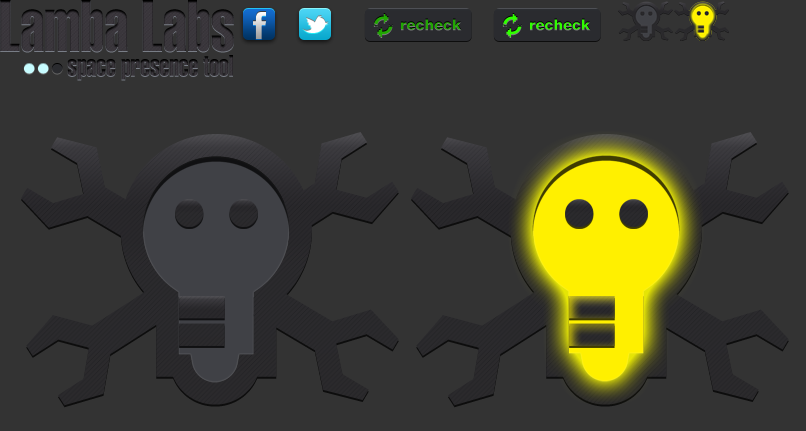
<style>
.page{position:relative;width:806px;height:431px;background:#333333}
.page>*{position:absolute;margin:0}
.t1{font:15px "Helvetica85-Heavy"}
.t2{font:29px "Helvetica-ExtraCompressed";color:#322e33}
</style>
<div class="page">
<p class="t1" style="left:401px;top:18px;width:61px;height:12px">recheck</p>
<p class="t1" style="left:530px;top:18px;width:61px;height:12px">recheck</p>
<p class="t2" style="left:67px;top:55px;width:166px;height:25px">space presence tool</p>
</div>
